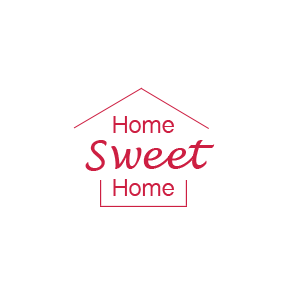
<style>
.page{position:relative;width:300px;height:300px;background:#ffffff}
.page>*{position:absolute;margin:0}
.t1{font:40px/36px "LucidaHandwriting-Italic";color:#cd1f42}
.t2{font:23px/27px "SinhalaSangamMN";color:#cd1f42}
</style>
<div class="page">
<p class="t1" style="left:85px;top:116px;width:130px;height:80px;text-align:center"><span class="t2"> Home<br> </span>Sweet<br> <span class="t2">Home</span></p>
</div>
